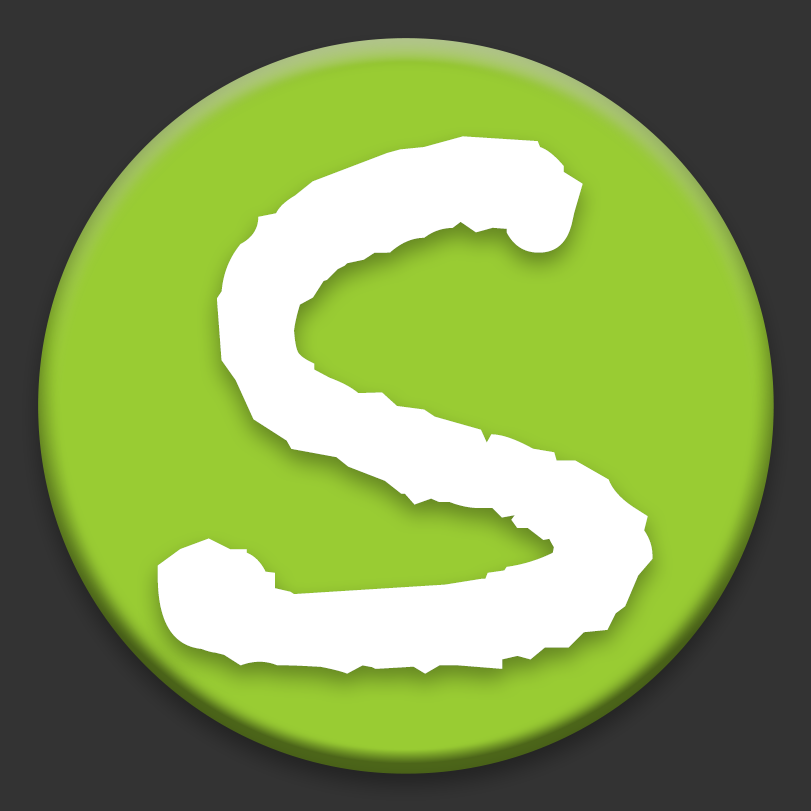
<style>
.page{position:relative;width:811px;height:811px;background:#333333}
.page>*{position:absolute;margin:0}
.t1{font:1182.7px "BradleyHandITCTT-Bold";color:#ffffff}
</style>
<div class="page">
<p class="t1" style="left:157px;top:136px;width:496px;height:538px">s</p>
</div>
